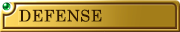
<style>
.page{position:relative;width:180px;height:32px}
.page>*{position:absolute;margin:0}
.t1{font:16px "CenturySchoolbook";letter-spacing:0.025em;color:#321a02}
</style>
<div class="page">
<p class="t1" style="left:19px;top:9px;width:83px;height:13px">DEFENSE</p>
</div>
